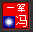
<style>
.page{position:relative;width:33px;height:32px;background:#f20000}
.page>*{position:absolute;margin:0}
.t1{font:10.4px "SimSun";color:#ffffff}
.t2{font:11.7px "SimSun";color:#ffffff}
</style>
<div class="page">
<p class="t1" style="left:7px;top:4px;width:18px;height:8px">一军</p>
<p class="t2" style="left:16px;top:15px;width:11px;height:12px">冯</p>
</div>
